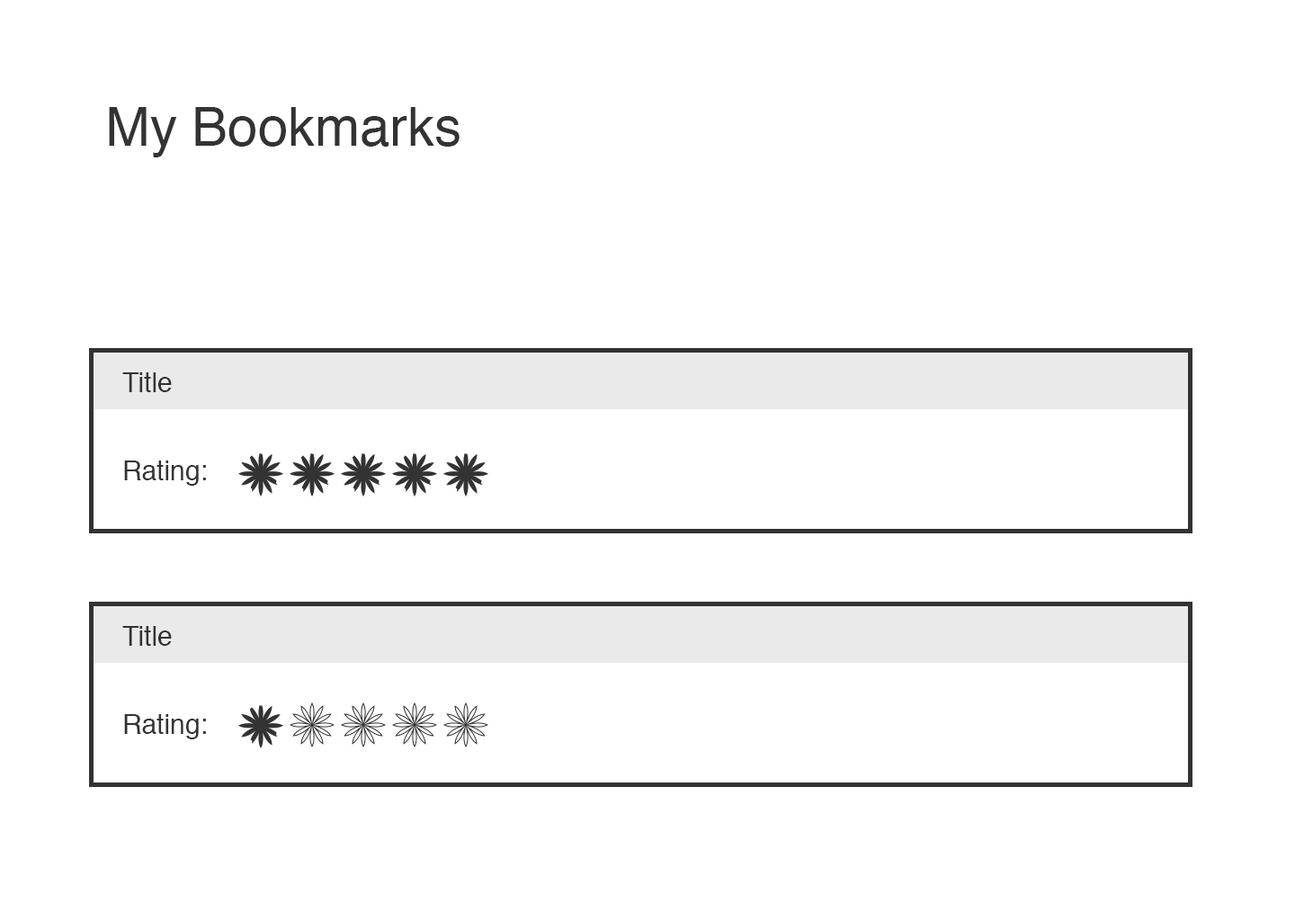
<style>
.page{position:relative;width:1295px;height:921px;background:#ffffff}
.page>*{position:absolute;margin:0}
.t1{font:54px "Helvetica";color:#333333}
.t2{font:27px "Helvetica";color:#333333}
</style>
<div class="page">
<p class="t1" style="left:109px;top:107px;width:351px;height:50px">My Bookmarks</p>
<p class="t2" style="left:122px;top:372px;width:50px;height:20px">Title</p>
<p class="t2" style="left:124px;top:460px;width:82px;height:26px">Rating:</p>
<p class="t2" style="left:122px;top:626px;width:50px;height:20px">Title</p>
<p class="t2" style="left:124px;top:714px;width:82px;height:25px">Rating:</p>
</div>
